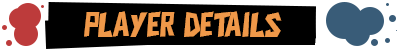
<style>
.page{position:relative;width:400px;height:50px;background:#000000}
.page>*{position:absolute;margin:0}
.t1{font:36px "CIKANDEI";color:#ef9849}
</style>
<div class="page">
<p class="t1" style="left:84px;top:11px;width:198px;height:26px">Player details</p>
</div>
